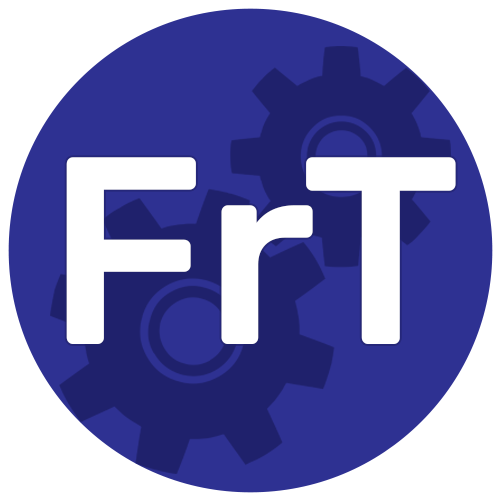
<style>
.page{position:relative;width:500px;height:500px;background:#ffffff}
.page>*{position:absolute;margin:0}
.t1{font:266.7px "Rubik-Medium";color:#ffffff}
</style>
<div class="page">
<p class="t1" style="left:66px;top:157px;width:390px;height:187px">FrT</p>
</div>
